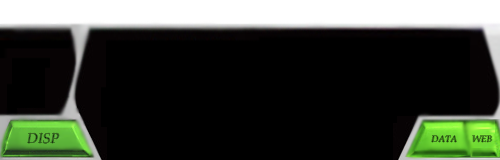
<style>
.page{position:relative;width:500px;height:160px;background:#000000}
.page>*{position:absolute;margin:0}
.t1{font:14px "BookAntiqua-Italic";color:#1c3712}
.t2{font:9px "BookAntiqua-Italic";color:#214110}
.t3{font:9px "BookAntiqua-Italic";color:#234311}
</style>
<div class="page">
<p class="t1" style="left:27px;top:133px;width:32px;height:11px">DISP</p>
<p class="t2" style="left:431px;top:135px;width:26px;height:7px">DATA</p>
<p class="t3" style="left:472px;top:135px;width:20px;height:7px">WEB</p>
</div>
